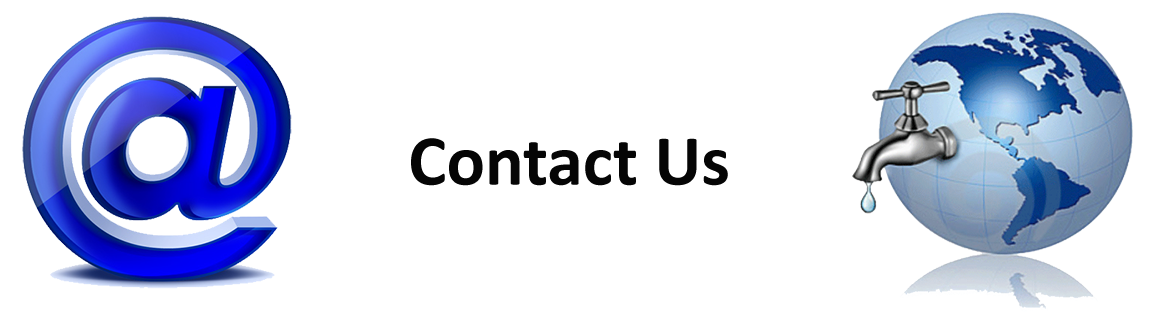
<style>
.page{position:relative;width:1154px;height:317px;background:#ffffff}
.page>*{position:absolute;margin:0}
.t1{font:72px "Calibri-Bold";color:#050505}
</style>
<div class="page">
<p class="t1" style="left:411px;top:138px;width:317px;height:48px">Contact Us</p>
</div>
